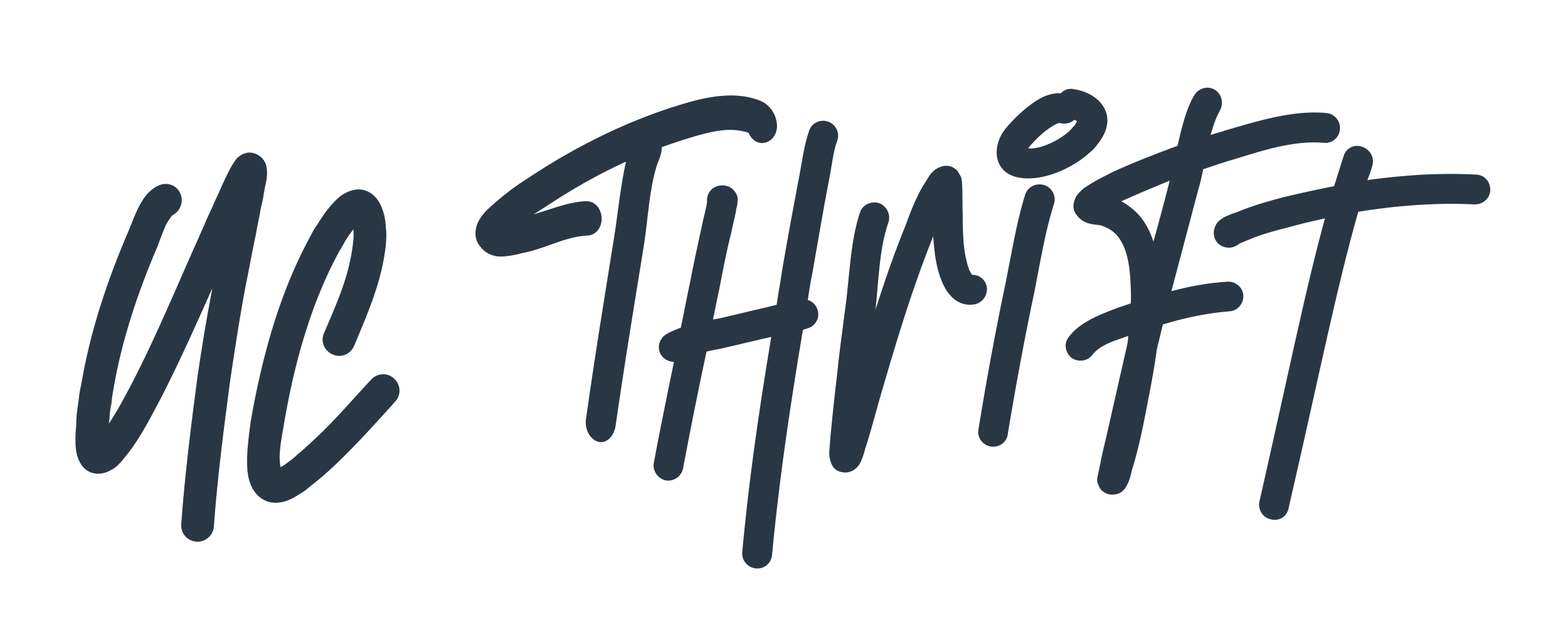
<style>
.page{position:relative;width:1568px;height:627px;background:#ffffff}
.page>*{position:absolute;margin:0}
.t1{font:539.4px "DemonSayHi";letter-spacing:0.02em;color:#293745}
.t2{font:589.6px "DemonSayHi";letter-spacing:-0.02em;color:#293745}
.t3{font:589.6px "DemonSayHi";letter-spacing:0.06em;color:#293745}
.t4{font:625.7px "DemonSayHi";letter-spacing:-0.04em;color:#293745;scale:0.86 1}
.t5{font:539.4px "DemonSayHi";letter-spacing:0.04em;color:#293745}
.t6{font:539.4px "DemonSayHi";letter-spacing:-0.02em;color:#293745}
.t7{font:539.4px "DemonSayHi";color:#293745}
</style>
<div class="page">
<p class="t1" style="left:75px;top:87px;width:1416px;height:482px;rotate:-2deg"><span class="t2">U</span><span class="t3">c </span><span class="t4">t</span>hr<span class="t5">i</span><span class="t6">f</span><span class="t7">T</span></p>
</div>
